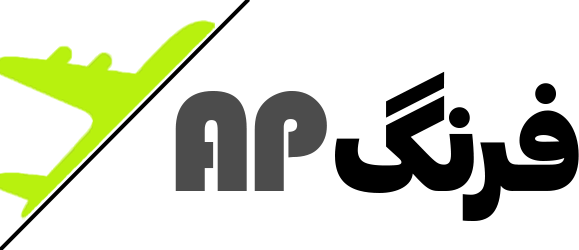
<style>
.page{position:relative;width:579px;height:250px;background:#ffffff}
.page>*{position:absolute;margin:0}
.t1{font:119.8px "GraphikArabic-Super";letter-spacing:-0.05em;color:#000000}
.t2{font:145.8px "Bauhaus93";letter-spacing:-0.05em;color:#4c4c4c}
</style>
<div class="page">
<p class="t1" style="left:175px;top:71px;width:404px;height:150px"><span class="t2">AP </span>فرنگ</p>
</div>
